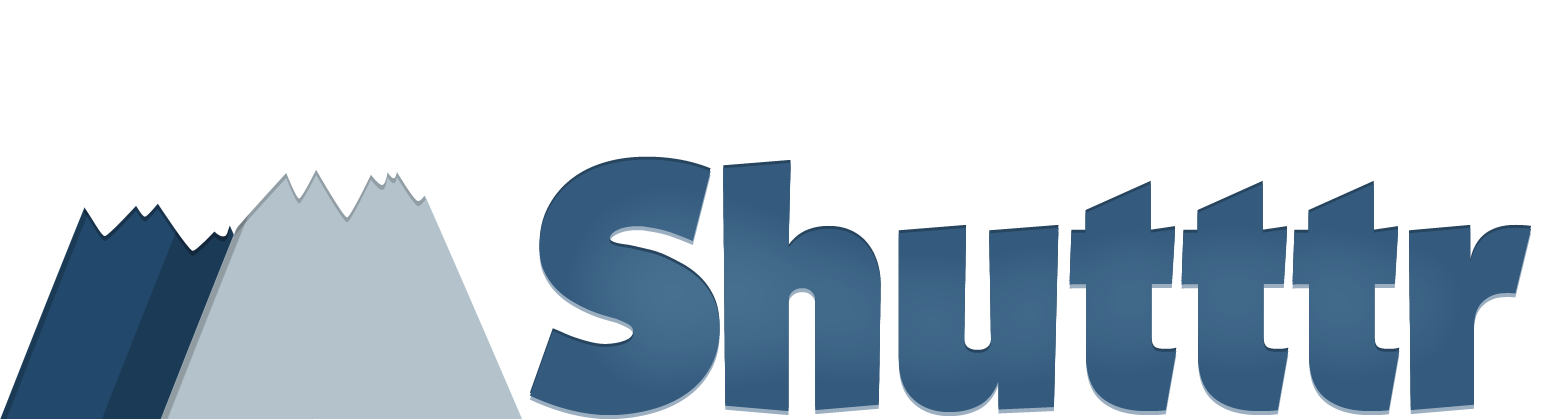
<style>
.page{position:relative;width:1544px;height:420px;background:#ffffff}
.page>*{position:absolute;margin:0}
.t1{font:299.7px "GROBOLD";color:#345b7e}
</style>
<div class="page">
<p class="t1" style="left:530px;top:159px;width:1001px;height:256px">Shutttr</p>
</div>
